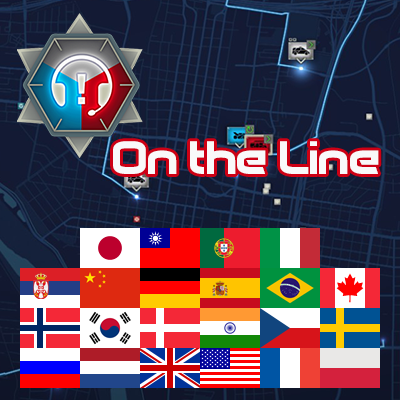
<style>
.page{position:relative;width:400px;height:400px}
.page>*{position:absolute;margin:0}
.t1{font:48px "PicklePushing";color:#f9f9f9}
</style>
<div class="page">
<p class="t1" style="left:113px;top:141px;width:266px;height:33px">On the Line</p>
</div>
